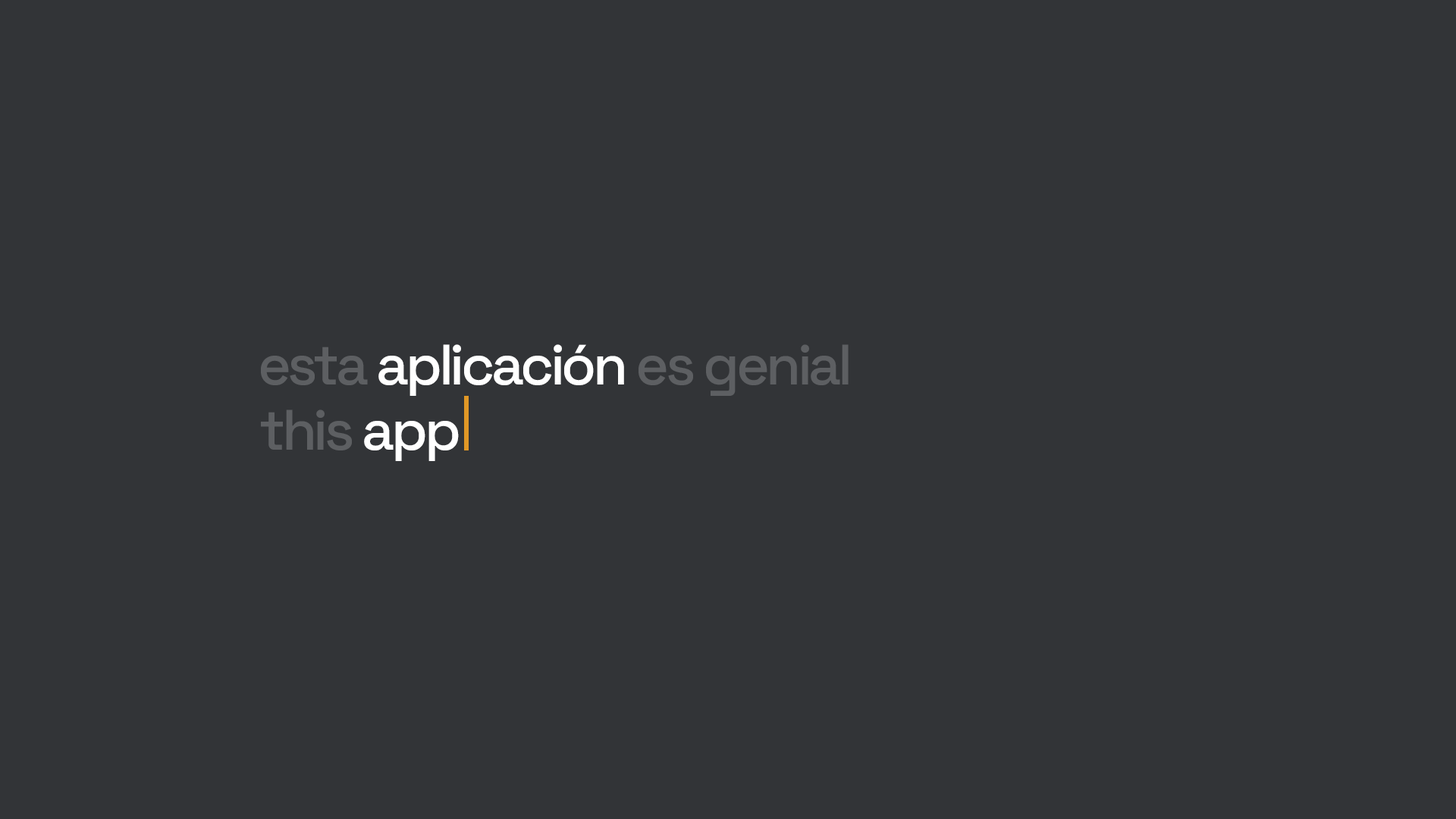
<style>
.page{position:relative;width:1456px;height:819px;background:#323437}
.page>*{position:absolute;margin:0}
.t1{font:56.9px "SpaceGrotesk-Medium";letter-spacing:-0.06em;color:#ffffff}
.t2{font:56.9px "SpaceGrotesk-Medium";letter-spacing:-0.06em;color:#5d5f62}
</style>
<div class="page">
<p class="t1" style="left:261px;top:344px;width:588px;height:52px"><span class="t2">esta </span>aplicación<span class="t2"> es genial</span></p>
<p class="t2" style="left:261px;top:409px;width:198px;height:52px">this<span class="t1"> app</span></p>
</div>
